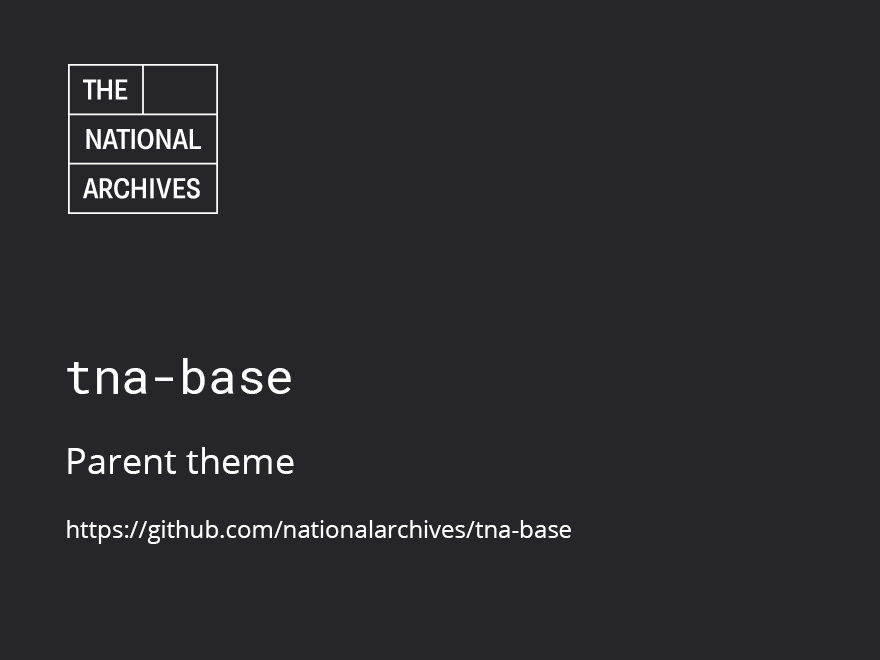
<style>
.page{position:relative;width:880px;height:660px;background:#26262a}
.page>*{position:absolute;margin:0}
.t1{font:48px "RobotoMono-Regular";color:#ffffff}
.t2{font:24px "OpenSans";color:#ffffff}
.t3{font:36px "OpenSans";color:#ffffff}
</style>
<div class="page">
<p class="t1" style="left:67px;top:358px;width:224px;height:36px">tna-base</p>
<p class="t2" style="left:67px;top:447px;width:504px;height:97px"><span class="t3">Parent theme<br><br></span>https://github.com/nationalarchives/tna-base</p>
</div>
